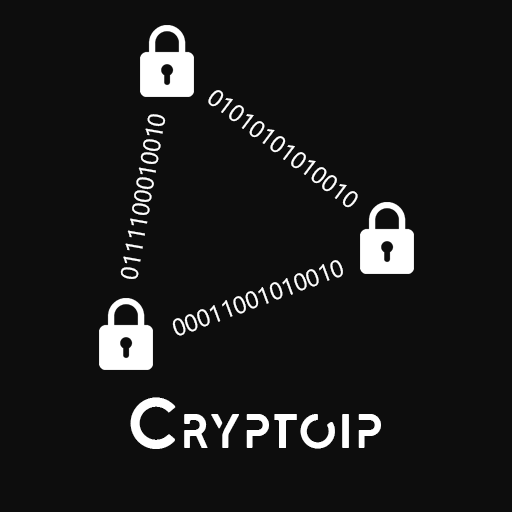
<style>
.page{position:relative;width:512px;height:512px;background:#0d0d0d}
.page>*{position:absolute;margin:0}
.t1{font:24px "SegoeUI";color:#ffffff}
.t2{font:48px "LEIXO-DEMO";color:#ffffff}
.t3{font:72px "LEIXO-DEMO";color:#ffffff}
</style>
<div class="page">
<p class="t1" style="left:208px;top:90px;width:150px;height:118px;rotate:37deg">01010101010010</p>
<p class="t1" style="left:120px;top:114px;width:46px;height:165px;rotate:-80deg">0111100010010</p>
<p class="t1" style="left:172px;top:260px;width:171px;height:76px;rotate:-20deg">00011001010010</p>
<p class="t2" style="left:130px;top:397px;width:251px;height:52px"><span class="t3">C</span>RYPTOIP</p>
</div>
